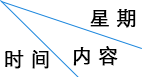
<style>
.page{position:relative;width:142px;height:77px;background:#ffffff}
.page>*{position:absolute;margin:0}
.t1{font:20px "STHeitiSC-Light";color:#000000;font-weight:bold}
</style>
<div class="page">
<p class="t1" style="left:90px;top:9px;width:46px;height:19px">星 期</p>
<p class="t1" style="left:5px;top:50px;width:44px;height:19px">时 间</p>
<p class="t1" style="left:73px;top:46px;width:45px;height:20px">内 容</p>
</div>
